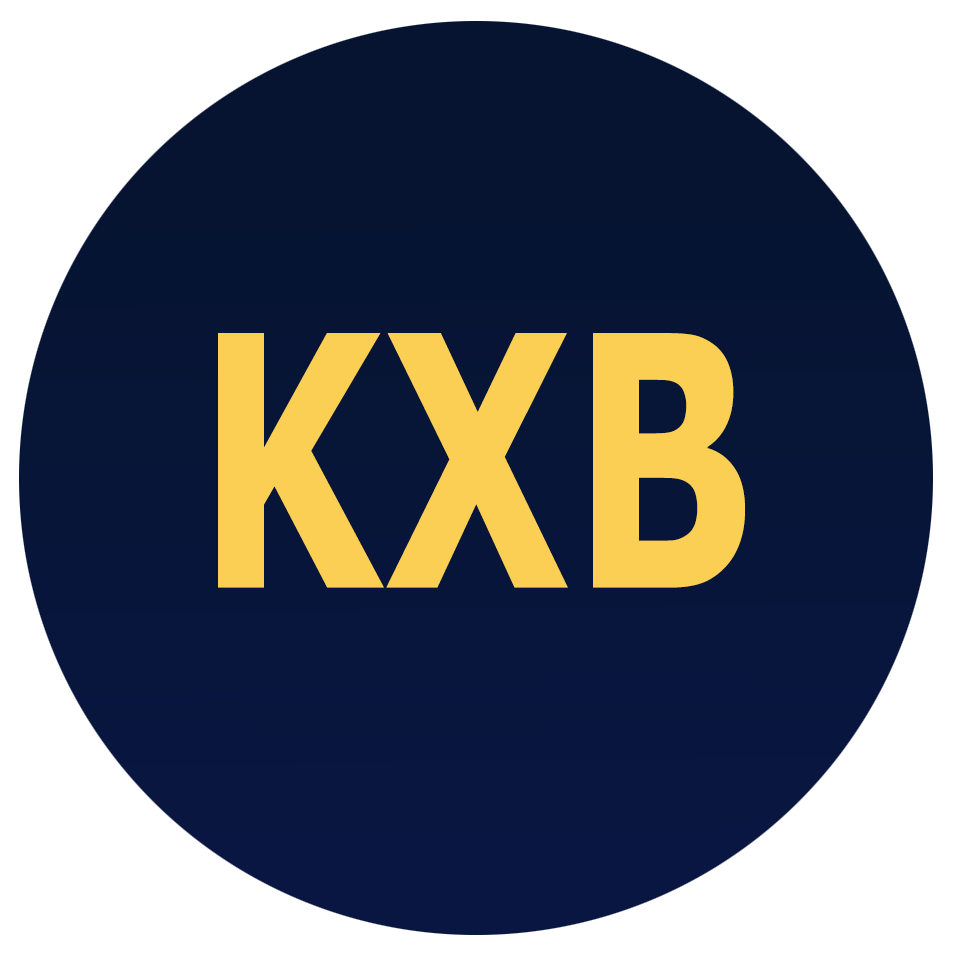
<style>
.page{position:relative;width:962px;height:959px;background:#ffffff}
.page>*{position:absolute;margin:0}
.t1{font:349.7px "Verdana-Bold";color:#fbcf54;scale:0.7 1}
</style>
<div class="page">
<p class="t1" style="left:218px;top:333px;width:527px;height:255px">KXB</p>
</div>
